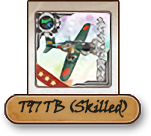
<style>
.page{position:relative;width:151px;height:136px;background:#ffffff}
.page>*{position:absolute;margin:0}
.t1{font:16px "VinerHandITC";letter-spacing:-0.08em;color:#1c1e1b;font-weight:bold}
</style>
<div class="page">
<p class="t1" style="left:18px;top:99px;width:110px;height:19px">T97 TB (Skilled)</p>
</div>
